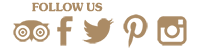
<style>
.page{position:relative;width:200px;height:50px;background:#ffffff}
.page>*{position:absolute;margin:0}
.t1{font:12.2px "SouvenirItcTEE-Demi";color:#ab8b65}
</style>
<div class="page">
<p class="t1" style="left:32px;top:2px;width:71px;height:10px">FOLLOW US</p>
</div>
